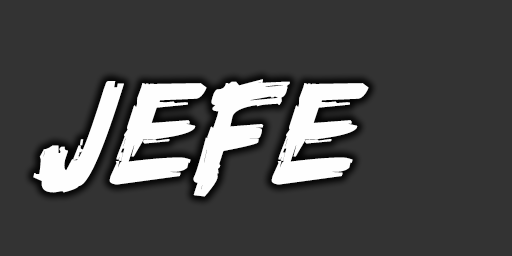
<style>
.page{position:relative;width:512px;height:256px;background:#333333}
.page>*{position:absolute;margin:0}
.t1{font:149.9px "EdoSZ";color:#fefefe;font-weight:bold;font-style:italic;scale:1.05 1}
</style>
<div class="page">
<p class="t1" style="left:33px;top:79px;width:336px;height:118px">JEFE</p>
</div>
